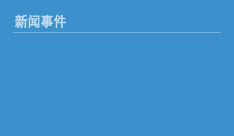
<style>
.page{position:relative;width:234px;height:136px;background:#3a91cb}
.page>*{position:absolute;margin:0}
.t1{font:14px "SimHei";color:#b9d7ef;font-weight:bold;scale:0.9 1}
</style>
<div class="page">
<p class="t1" style="left:15px;top:14px;width:51px;height:15px">新闻事件</p>
</div>
